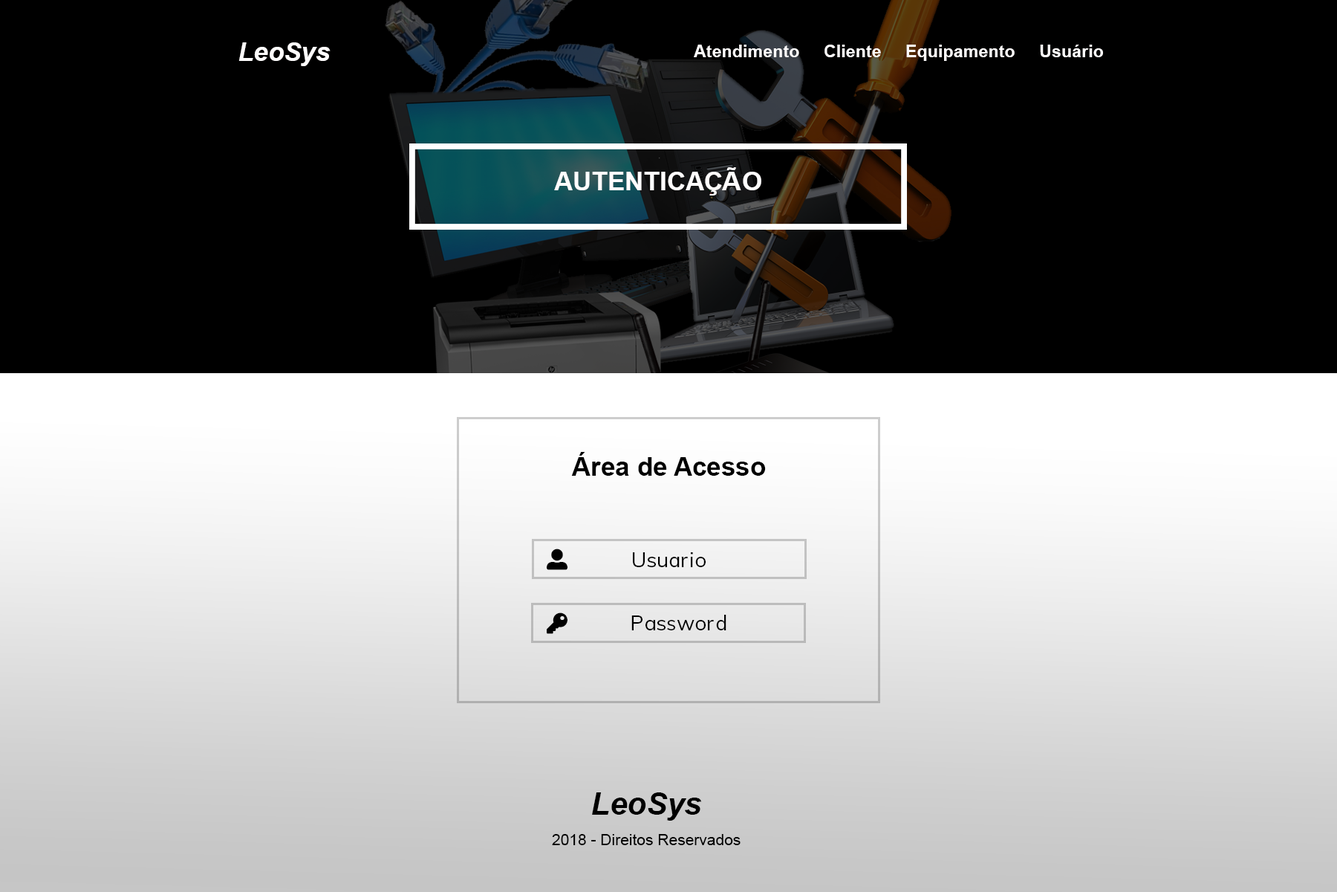
<style>
.page{position:relative;width:1337px;height:892px;background:#000000}
.page>*{position:absolute;margin:0}
.t1{font:44.6px "Arial-BoldItalicMT";color:#fffdfd}
.t2{font:29.7px "Arial-BoldMT";color:#fffdfd}
.t3{font:44.6px "Arial-BoldMT";color:#fffdfd}
.t4{font:44.6px "Arial-BoldMT";color:#000000}
.t5{font:53.5px "Arial-BoldItalicMT";color:#000000}
.t6{font:26.7px "ArialMT";color:#000000}
</style>
<div class="page">
<p class="t1" style="left:239px;top:42px;width:92px;height:24px">LeoSys</p>
<p class="t2" style="left:694px;top:45px;width:409px;height:16px">Atendimento     Cliente     Equipamento     Usuário</p>
<p class="t3" style="left:554px;top:167px;width:208px;height:28px">AUTENTICAÇÃO</p>
<p class="t4" style="left:571px;top:452px;width:195px;height:24px">Área de Acesso</p>
<p class="t5" style="left:592px;top:792px;width:110px;height:28px">LeoSys</p>
<p class="t6" style="left:552px;top:834px;width:189px;height:11px">2018 - Direitos Reservados</p>
</div>
